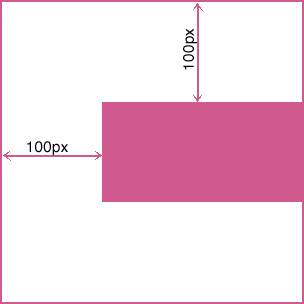
<style>
.page{position:relative;width:304px;height:304px;background:#ffffff}
.page>*{position:absolute;margin:0}
.t1{font:15px "Helvetica";letter-spacing:0.025em;color:#000000}
</style>
<div class="page">
<p class="t1" style="left:183px;top:28px;width:14px;height:42px;rotate:-90deg">100px</p>
<p class="t1" style="left:27px;top:141px;width:41px;height:15px">100px</p>
</div>
